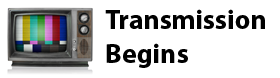
<style>
.page{position:relative;width:280px;height:78px;background:#ffffff}
.page>*{position:absolute;margin:0}
.t1{font:27.6px "MyriadPro-Bold";color:#000000}
</style>
<div class="page">
<p class="t1" style="left:105px;top:9px;width:160px;height:59px">Transmission<br>Begins</p>
</div>
